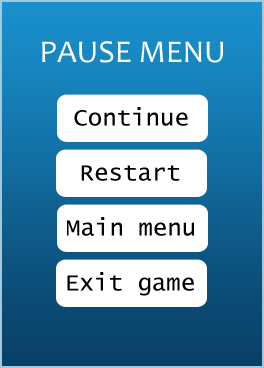
<style>
.page{position:relative;width:264px;height:368px;background:#ffffff}
.page>*{position:absolute;margin:0}
.t1{font:32px "Candara";color:#ffffff}
.t2{font:24px "LucidaConsole";color:#010101}
</style>
<div class="page">
<p class="t1" style="left:42px;top:41px;width:181px;height:22px">PAUSE MENU</p>
<p class="t2" style="left:74px;top:107px;width:114px;height:19px">Continue</p>
<p class="t2" style="left:81px;top:165px;width:99px;height:16px">Restart</p>
<p class="t2" style="left:67px;top:217px;width:127px;height:19px">Main menu</p>
<p class="t2" style="left:67px;top:272px;width:127px;height:24px">Exit game</p>
</div>
